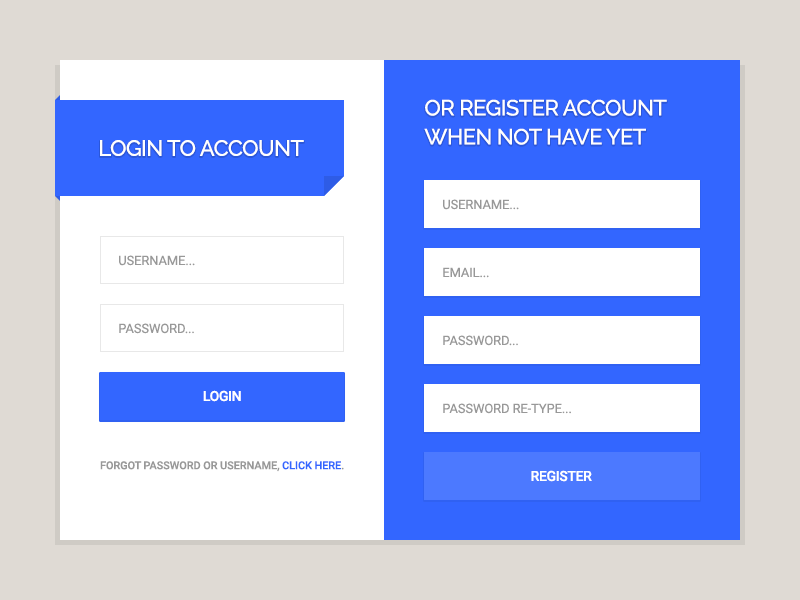
<style>
.page{position:relative;width:800px;height:600px;background:#ffffff}
.page>*{position:absolute;margin:0}
.t1{font:22px/29px "Raleway-Medium";letter-spacing:-0.025em;color:#ffffff;text-transform:uppercase}
.t2{font:22px "Raleway-Medium";letter-spacing:-0.025em;color:#ffffff;text-transform:uppercase}
.t3{font:13px "Roboto-Regular";letter-spacing:-0.01em;color:#989898;text-transform:uppercase}
.t4{font:14px "Roboto-Medium";letter-spacing:-0.025em;color:#ffffff;text-transform:uppercase}
.t5{font:11px "Roboto-Medium";letter-spacing:-0.01em;color:#989898;text-transform:uppercase}
.t6{font:11px "Roboto-Medium";letter-spacing:-0.01em;color:#3366ff;text-transform:uppercase}
</style>
<div class="page">
<p class="t1" style="left:424px;top:99px;width:243px;height:46px">OR REGISTER ACCOUNT<br>WHEN NOT HAVE YET</p>
<p class="t2" style="left:100px;top:140px;width:204px;height:16px">Login to account</p>
<p class="t3" style="left:443px;top:199px;width:76px;height:11px">USERNAME...</p>
<p class="t3" style="left:119px;top:255px;width:76px;height:11px">USERNAME...</p>
<p class="t3" style="left:443px;top:267px;width:46px;height:11px">EMAIL...</p>
<p class="t3" style="left:119px;top:323px;width:75px;height:11px">PASSWORD...</p>
<p class="t3" style="left:443px;top:335px;width:75px;height:11px">PASSWORD...</p>
<p class="t4" style="left:203px;top:390px;width:38px;height:12px">LOGIN</p>
<p class="t3" style="left:443px;top:403px;width:128px;height:11px">PASSWORD RE-TYPE...</p>
<p class="t5" style="left:100px;top:461px;width:244px;height:11px">FORGOT PASSWORD OR USERNAME, <span class="t6">CLICK HERE</span>.</p>
<p class="t4" style="left:531px;top:470px;width:61px;height:12px">REGISTER</p>
</div>
